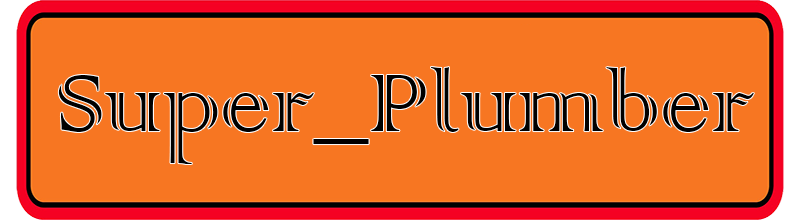
<style>
.page{position:relative;width:800px;height:220px;background:#f77622}
.page>*{position:absolute;margin:0}
.t1{font:108.3px "ColonnaMT";color:#000000}
</style>
<div class="page">
<p class="t1" style="left:58px;top:67px;width:696px;height:97px">Super_Plumber</p>
</div>
